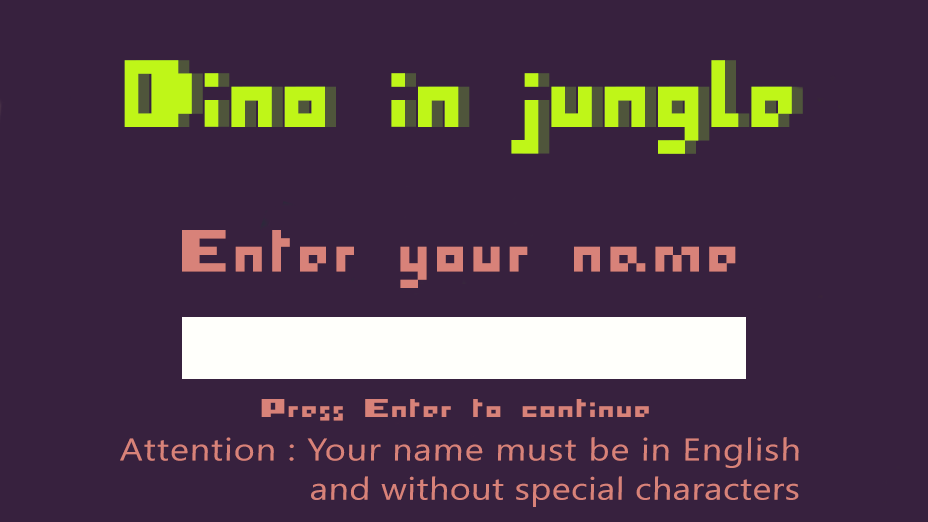
<style>
.page{position:relative;width:928px;height:522px;background:#37213e}
.page>*{position:absolute;margin:0}
.t1{font:66.3px "I-pixel-u";letter-spacing:0.025em;color:#d88279;scale:1.05 1}
.t2{font:28.8px "I-pixel-u";color:#d88279;scale:1.25 1}
.t3{font:31.4px/39.3px "SegoeUI";letter-spacing:0.025em;color:#d88279;scale:1.14 1}
.t4{font:31.4px/39.3px "SegoeUI";letter-spacing:0.01em;color:#d88279;scale:1.14 1}
</style>
<div class="page">
<p class="t1" style="left:182px;top:230px;width:554px;height:58px">Enter your name</p>
<p class="t2" style="left:261px;top:399px;width:388px;height:22px">Press Enter to continue</p>
<p class="t3" style="left:120px;top:437px;width:679px;height:70px">Attention : Your name must be in English <br>      <span class="t4">and without special characters</span></p>
</div>
